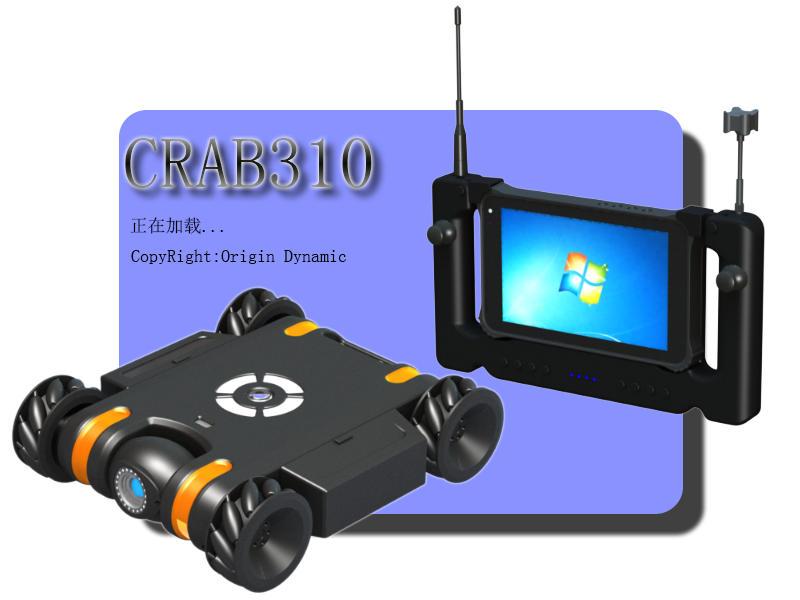
<style>
.page{position:relative;width:800px;height:600px;background:#ffffff}
.page>*{position:absolute;margin:0}
.t1{font:72px "SimSun"}
.t2{font:18px "SimSun";color:#000000}
</style>
<div class="page">
<p class="t1" style="left:125px;top:138px;width:247px;height:50px">CRAB310</p>
<p class="t2" style="left:130px;top:217px;width:93px;height:17px">正在加载...</p>
<p class="t2" style="left:131px;top:249px;width:215px;height:15px">CopyRight:Origin Dynamic</p>
</div>
